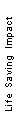
<style>
.page{position:relative;width:20px;height:115px;background:#ffffff}
.page>*{position:absolute;margin:0}
.t1{font:9px "ArialMT";letter-spacing:0.125em;color:#000000}
</style>
<div class="page">
<p class="t1" style="left:5px;top:17px;width:9px;height:94px;rotate:-90deg">Life Saving Impact</p>
</div>
